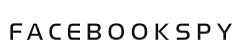
<style>
.page{position:relative;width:250px;height:46px;background:#ffffff}
.page>*{position:absolute;margin:0}
.t1{font:29.3px "RainBow6";letter-spacing:0.16em;color:#000000;text-transform:uppercase}
.t2{font:29.3px "RainBow6";letter-spacing:0.16em;color:#0f0f0f;text-transform:uppercase}
</style>
<div class="page">
<p class="t1" style="left:10px;top:23px;width:222px;height:17px">FaceBookSpy</p>
<p class="t2" style="left:10px;top:23px;width:222px;height:17px">FaceBookSpy</p>
</div>
